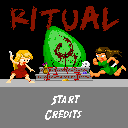
<style>
.page{position:relative;width:128px;height:128px;background:#000000}
.page>*{position:absolute;margin:0}
.t1{font:18px "ScribbleScrawl";color:#881400}
.t2{font:12px "SFComicScript";color:#fcfcfc}
</style>
<div class="page">
<p class="t1" style="left:10px;top:6px;width:109px;height:25px">Ritual</p>
<p class="t2" style="left:51px;top:95px;width:29px;height:10px">Start</p>
<p class="t2" style="left:45px;top:110px;width:37px;height:10px">Credits</p>
</div>
